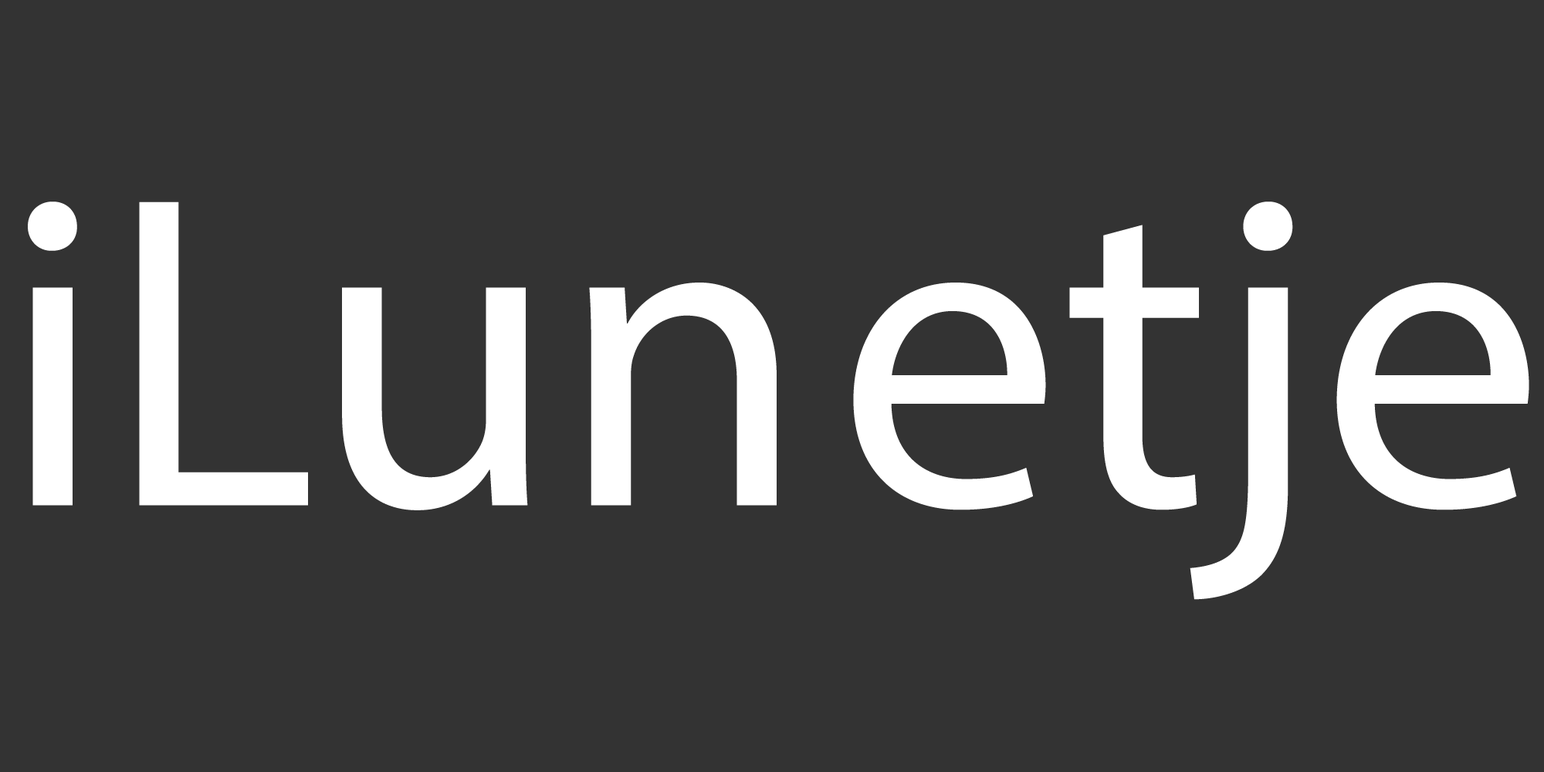
<style>
.page{position:relative;width:1544px;height:772px;background:#333333}
.page>*{position:absolute;margin:0}
.t1{font:449.7px "MyriadPro-Regular";color:#ffffff}
</style>
<div class="page">
<p class="t1" style="left:28px;top:202px;width:1502px;height:398px">iLun etje</p>
</div>
